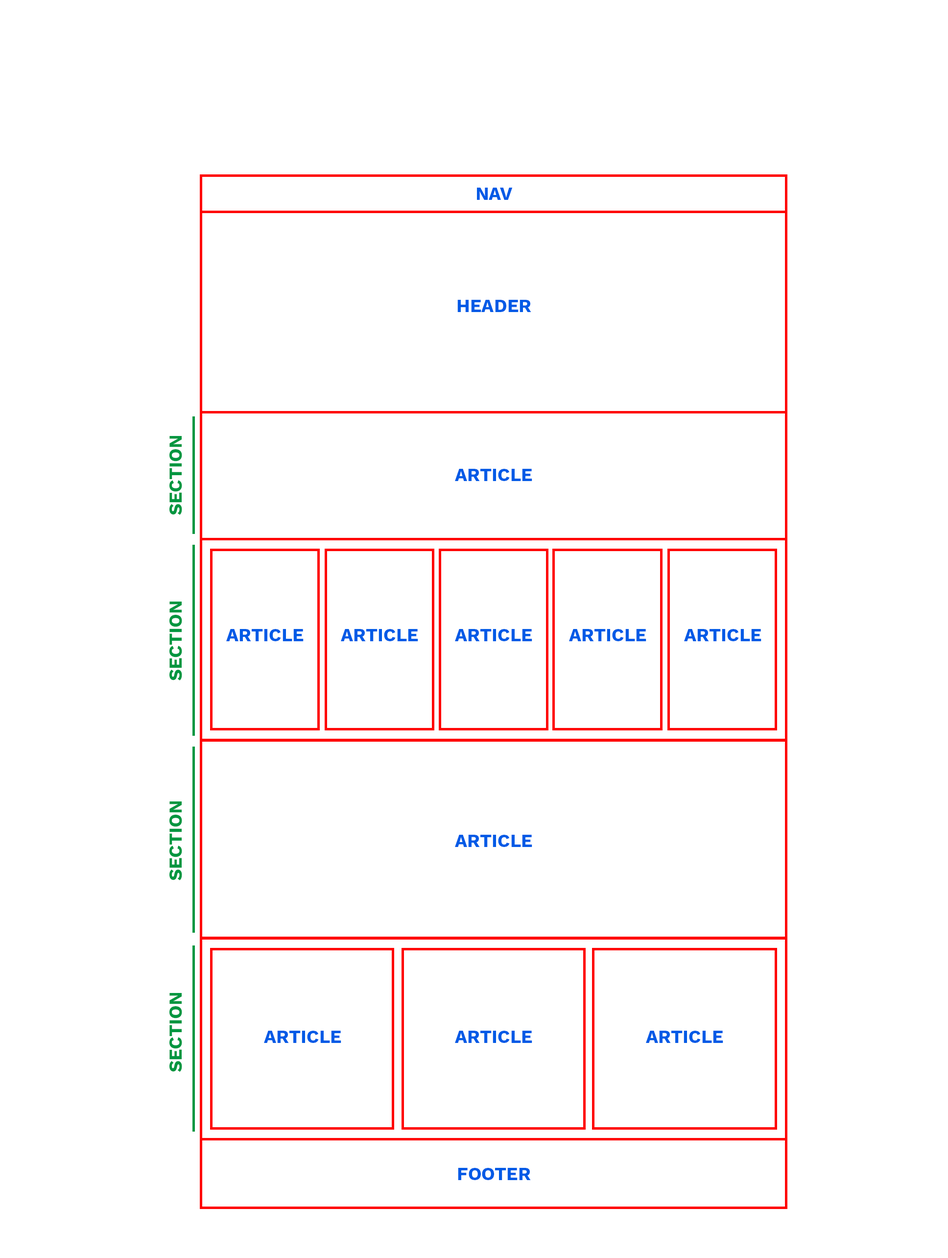
<style>
.page{position:relative;width:948px;height:1258px;background:#ffffff}
.page>*{position:absolute;margin:0}
.t1{font:18.4px "WorkSans-Bold";color:#005ae6;text-transform:uppercase}
.t2{font:18.4px "WorkSans-Bold";color:#009640;text-transform:uppercase}
</style>
<div class="page">
<p class="t1" style="left:477px;top:188px;width:36px;height:12px">Nav</p>
<p class="t1" style="left:457px;top:300px;width:74px;height:12px">header</p>
<p class="t2" style="left:169px;top:436px;width:13px;height:79px;rotate:-90deg">Section</p>
<p class="t1" style="left:455px;top:469px;width:77px;height:12px">article</p>
<p class="t2" style="left:169px;top:601px;width:13px;height:79px;rotate:-90deg">Section</p>
<p class="t1" style="left:226px;top:629px;width:78px;height:12px">article</p>
<p class="t1" style="left:341px;top:629px;width:77px;height:12px">article</p>
<p class="t1" style="left:455px;top:629px;width:77px;height:12px">article</p>
<p class="t1" style="left:569px;top:629px;width:77px;height:12px">article</p>
<p class="t1" style="left:684px;top:629px;width:78px;height:12px">article</p>
<p class="t2" style="left:169px;top:801px;width:13px;height:79px;rotate:-90deg">Section</p>
<p class="t1" style="left:455px;top:835px;width:77px;height:12px">article</p>
<p class="t2" style="left:169px;top:993px;width:13px;height:79px;rotate:-90deg">Section</p>
<p class="t1" style="left:264px;top:1030px;width:77px;height:13px">article</p>
<p class="t1" style="left:455px;top:1030px;width:77px;height:13px">article</p>
<p class="t1" style="left:646px;top:1030px;width:77px;height:13px">article</p>
<p class="t1" style="left:458px;top:1168px;width:73px;height:12px">footer</p>
</div>
